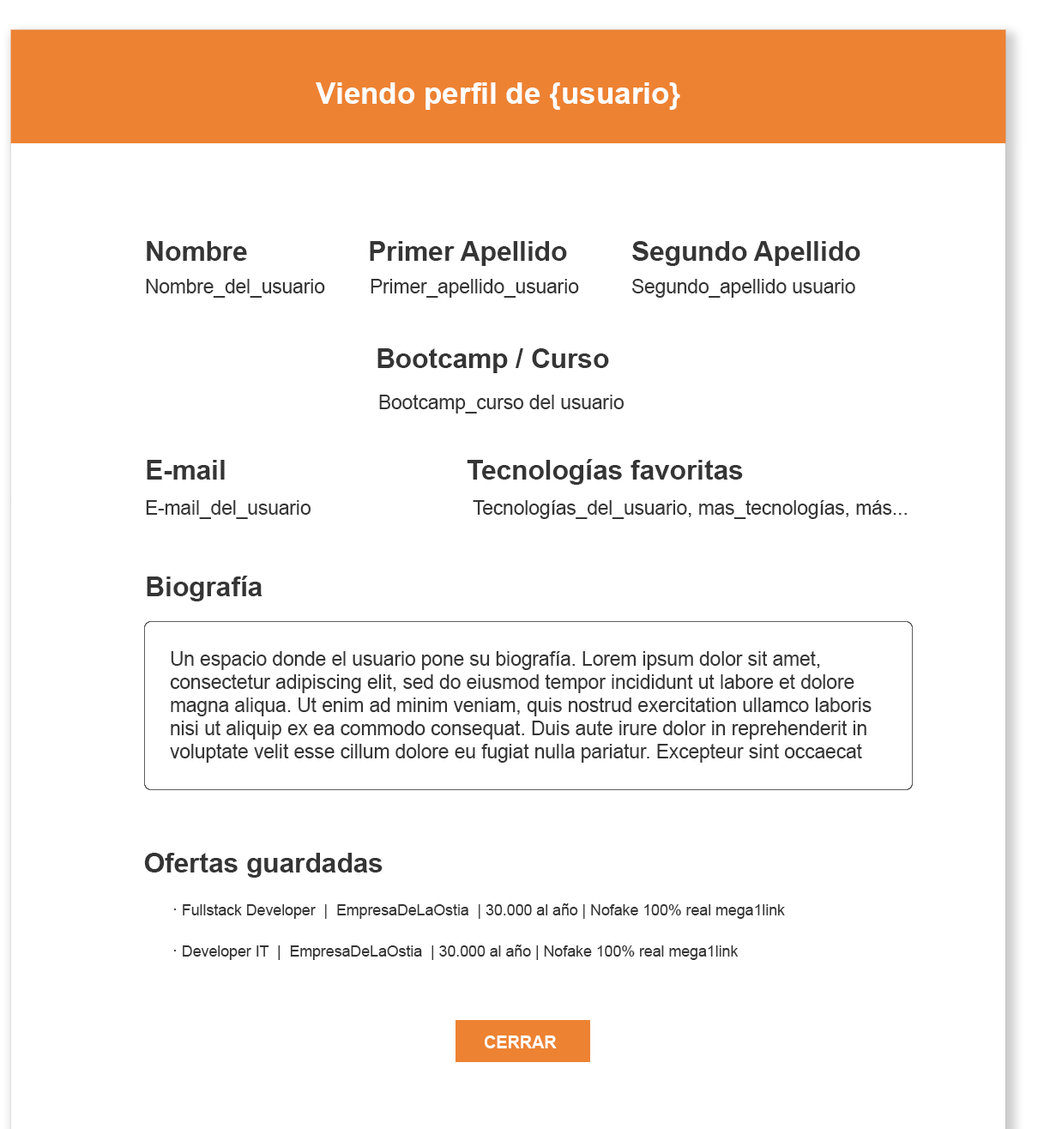
<style>
.page{position:relative;width:1056px;height:1129px;background:#ffffff}
.page>*{position:absolute;margin:0}
.t1{font:30.1px "Arial-BoldMT";color:#ffffff}
.t2{font:27.1px "Arial-BoldMT";color:#353535}
.t3{font:19.4px "ArialMT";color:#353535}
.t4{font:15.2px "ArialMT";color:#353535}
.t5{font:16.9px "Arial-BoldMT";color:#ffffff}
</style>
<div class="page">
<p class="t1" style="left:316px;top:82px;width:364px;height:28px">Viendo perfil de {usuario}</p>
<p class="t2" style="left:147px;top:241px;width:100px;height:20px">Nombre</p>
<p class="t2" style="left:370px;top:241px;width:197px;height:25px">Primer Apellido</p>
<p class="t2" style="left:632px;top:241px;width:229px;height:25px">Segundo Apellido</p>
<p class="t3" style="left:146px;top:279px;width:179px;height:19px">Nombre_del_usuario</p>
<p class="t3" style="left:371px;top:279px;width:208px;height:19px">Primer_apellido_usuario</p>
<p class="t3" style="left:632px;top:279px;width:223px;height:19px">Segundo_apellido usuario</p>
<p class="t2" style="left:377px;top:348px;width:232px;height:25px">Bootcamp / Curso</p>
<p class="t3" style="left:379px;top:395px;width:246px;height:19px">Bootcamp_curso del usuario</p>
<p class="t2" style="left:147px;top:460px;width:78px;height:20px">E-mail</p>
<p class="t2" style="left:467px;top:459px;width:276px;height:26px">Tecnologías favoritas</p>
<p class="t3" style="left:146px;top:500px;width:165px;height:19px">E-mail_del_usuario</p>
<p class="t3" style="left:473px;top:500px;width:434px;height:19px">Tecnologías_del_usuario, mas_tecnologías, más...</p>
<p class="t2" style="left:147px;top:576px;width:116px;height:25px">Biografía</p>
<p class="t3" style="left:170px;top:651px;width:702px;height:112px">Un espacio donde el usuario pone su biografía. Lorem ipsum dolor sit amet, consectetur adipiscing elit, sed do eiusmod tempor incididunt ut labore et dolore magna aliqua. Ut enim ad minim veniam, quis nostrud exercitation ullamco laboris nisi ut aliquip ex ea commodo consequat. Duis aute irure dolor in reprehenderit in voluptate velit esse cillum dolore eu fugiat nulla pariatur. Excepteur sint occaecat cupidatat non proident, sunt in culpa qui officia deserunt mollit anim id est laborum</p>
<p class="t2" style="left:144px;top:853px;width:239px;height:25px">Ofertas guardadas</p>
<p class="t4" style="left:174px;top:903px;width:611px;height:16px">· Fullstack Developer  |  EmpresaDeLaOstia  | 30.000 al año | Nofake 100% real mega1link</p>
<p class="t4" style="left:174px;top:945px;width:565px;height:15px">· Developer IT  |  EmpresaDeLaOstia  | 30.000 al año | Nofake 100% real mega1link</p>
<p class="t5" style="left:485px;top:1036px;width:72px;height:12px">CERRAR</p>
</div>
